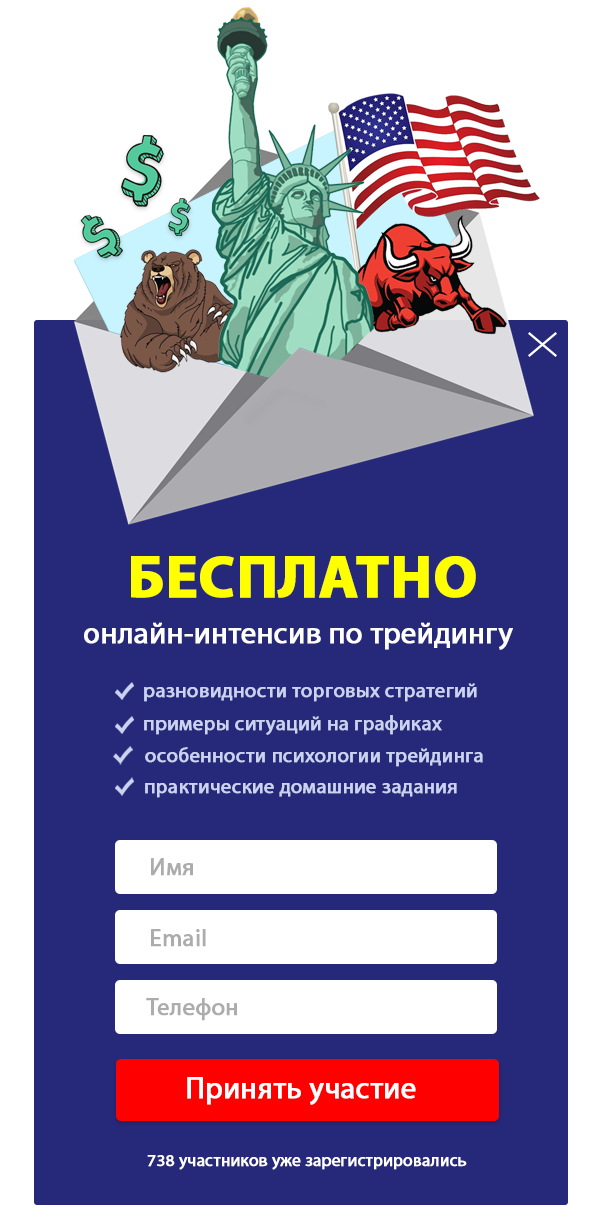
<style>
.page{position:relative;width:600px;height:1220px;background:#26287a}
.page>*{position:absolute;margin:0}
.t1{font:60px "MyriadPro-Bold";color:#ffff00;font-weight:bold}
.t2{font:30px "MyriadPro-Regular";color:#ffffff;font-weight:bold}
.t3{font:20.6px "MyriadPro-Regular";color:#cbd3f1;font-weight:bold}
.t4{font:24px "MyriadPro-Regular";color:#acacac;font-weight:bold}
.t5{font:17px "MyriadPro-Regular";color:#ffffff;font-weight:bold}
</style>
<div class="page">
<p class="t1" style="left:131px;top:556px;width:345px;height:42px">БЕСПЛАТНО</p>
<p class="t2" style="left:84px;top:622px;width:429px;height:28px">онлайн-интенсив по трейдингу</p>
<p class="t3" style="left:144px;top:683px;width:333px;height:19px">разновидности торговых стратегий</p>
<p class="t3" style="left:144px;top:715px;width:298px;height:20px">примеры ситуаций на графиках</p>
<p class="t3" style="left:145px;top:747px;width:338px;height:20px">особенности психологии трейдинга</p>
<p class="t3" style="left:145px;top:783px;width:312px;height:15px">практические домашние задания</p>
<p class="t4" style="left:151px;top:858px;width:42px;height:18px">Имя</p>
<p class="t4" style="left:151px;top:929px;width:55px;height:18px">Email</p>
<p class="t4" style="left:146px;top:998px;width:91px;height:23px">Телефон</p>
<p class="t2" style="left:187px;top:1077px;width:229px;height:28px">Принять участие</p>
<p class="t5" style="left:147px;top:1155px;width:320px;height:15px">738 участников уже зарегистрировались</p>
</div>
